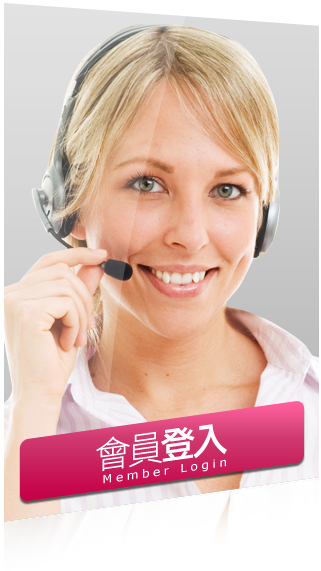
<style>
.page{position:relative;width:321px;height:571px}
.page>*{position:absolute;margin:0}
.t1{font:36px "DFLiHei-Lt-WIN-BF";letter-spacing:-0.1em;color:#ffffff}
.t2{font:36px "DFLiHei-Md-WIN-BF";letter-spacing:-0.1em;color:#ffffff}
.t3{font:11.4px "Verdana";letter-spacing:0.3em;color:#ffffff;scale:1.06 1}
</style>
<div class="page">
<p class="t1" style="left:96px;top:424px;width:131px;height:48px;rotate:-8deg">會員<span class="t2">登入</span></p>
<p class="t3" style="left:103px;top:459px;width:123px;height:25px;rotate:-8deg">Member Login</p>
</div>
